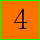
<style>
.page{position:relative;width:40px;height:40px;background:#ff7200}
.page>*{position:absolute;margin:0}
.t1{font:30px "SimSun";color:#000000}
</style>
<div class="page">
<p class="t1" style="left:14px;top:8px;width:13px;height:21px">4</p>
</div>
